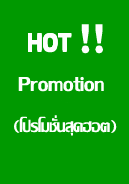
<style>
.page{position:relative;width:129px;height:184px;background:#009900}
.page>*{position:absolute;margin:0}
.t1{font:60px "LilyUPC";color:#fdfffd}
.t2{font:36px "LilyUPC";color:#fdfffd}
.t3{font:30px "LilyUPC";color:#fdfffd}
.t4{font:24px "LilyUPC";color:#fdfffd}
</style>
<div class="page">
<p class="t1" style="left:81px;top:24px;width:22px;height:30px"><span class="t2"> </span>!!</p>
<p class="t2" style="left:28px;top:35px;width:44px;height:18px">HOT</p>
<p class="t2" style="left:28px;top:34px;width:44px;height:18px">HOT</p>
<p class="t2" style="left:28px;top:33px;width:44px;height:18px">HOT</p>
<p class="t2" style="left:28px;top:33px;width:44px;height:18px">HOT</p>
<p class="t3" style="left:18px;top:76px;width:86px;height:16px">Promotion</p>
<p class="t4" style="left:14px;top:115px;width:103px;height:21px">(โปรโมชั่นสุดฮอต)</p>
</div>
